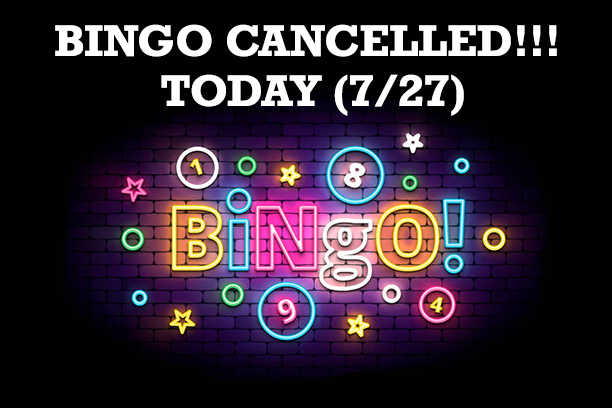
<style>
.page{position:relative;width:612px;height:408px;background:#010101}
.page>*{position:absolute;margin:0}
.t1{font:41.7px "Rockwell-Bold";color:#ffffff}
</style>
<div class="page">
<p class="t1" style="left:55px;top:24px;width:502px;height:92px;text-align:center">BINGO CANCELLED!!! <br>TODAY (7/27)</p>
</div>
